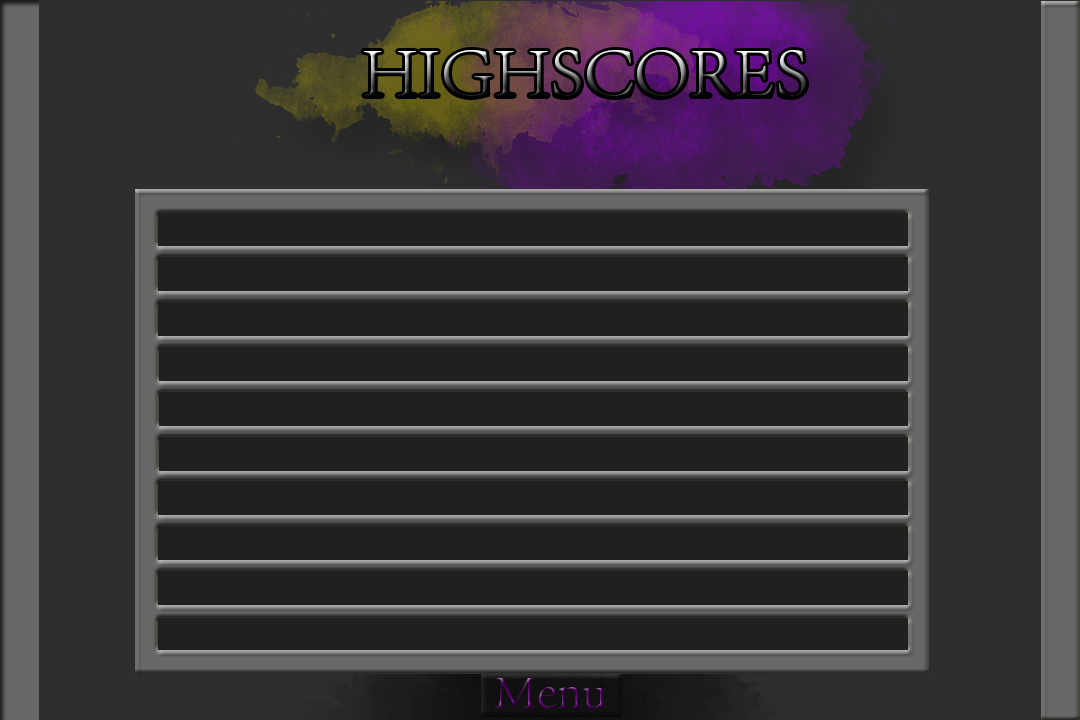
<style>
.page{position:relative;width:1080px;height:720px;background:#202020}
.page>*{position:absolute;margin:0}
.t1{font:72px "AdobeSongStd-Light"}
.t2{font:48px "AdobeSongStd-Light"}
</style>
<div class="page">
<p class="t1" style="left:364px;top:50px;width:442px;height:47px">HIGHSCORES</p>
<p class="t2" style="left:495px;top:678px;width:111px;height:32px">Menu</p>
</div>
